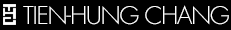
<style>
.page{position:relative;width:231px;height:30px;background:#000000}
.page>*{position:absolute;margin:0}
.t1{font:24px "FuturaLight";letter-spacing:-0.05em;color:#ffffff}
</style>
<div class="page">
<p class="t1" style="left:23px;top:5px;width:206px;height:20px">TIEN-HUNG CHANG</p>
</div>
